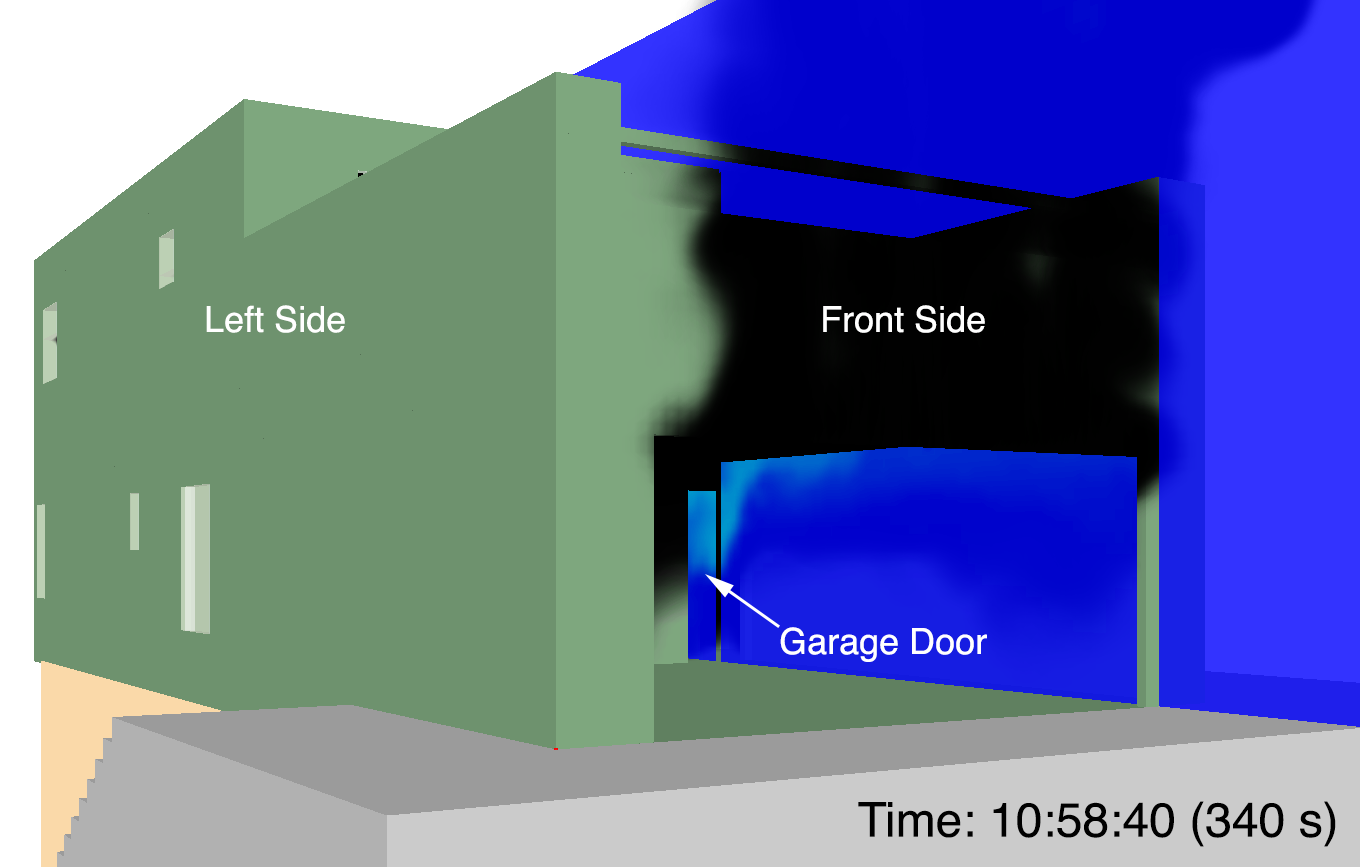
<style>
.page{position:relative;width:1360px;height:867px;background:#6e926e}
.page>*{position:absolute;margin:0}
.t1{font:36px "Helvetica";color:#ffffff}
.t2{font:48px "Helvetica";color:#000000}
</style>
<div class="page">
<p class="t1" style="left:206px;top:305px;width:139px;height:28px">Left Side</p>
<p class="t1" style="left:823px;top:305px;width:162px;height:28px">Front Side</p>
<p class="t1" style="left:780px;top:627px;width:207px;height:35px">Garage Door</p>
<p class="t2" style="left:858px;top:801px;width:478px;height:46px">Time: 10:58:40 (340 s)</p>
</div>
